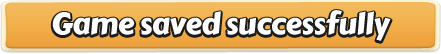
<style>
.page{position:relative;width:441px;height:54px}
.page>*{position:absolute;margin:0}
.t1{font:30px "CarterOne";letter-spacing:-0.02em;color:#ffffff}
</style>
<div class="page">
<p class="t1" style="left:52px;top:10px;width:339px;height:31px">Game saved successfully</p>
</div>
